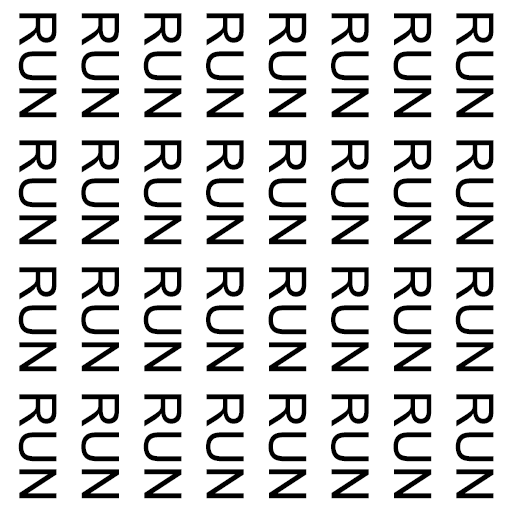
<style>
.page{position:relative;width:512px;height:512px;background:#ffffff}
.page>*{position:absolute;margin:0}
.t1{font:52px "ArialMT";color:#000000}
</style>
<div class="page">
<p class="t1" style="left:18px;top:13px;width:476px;height:486px;rotate:90deg">RUN RUN RUN RUN<br>RUN RUN RUN RUN<br>RUN RUN RUN RUN<br>RUN RUN RUN RUN<br>RUN RUN RUN RUN<br>RUN RUN RUN RUN<br>RUN RUN RUN RUN<br>RUN RUN RUN RUN</p>
</div>
